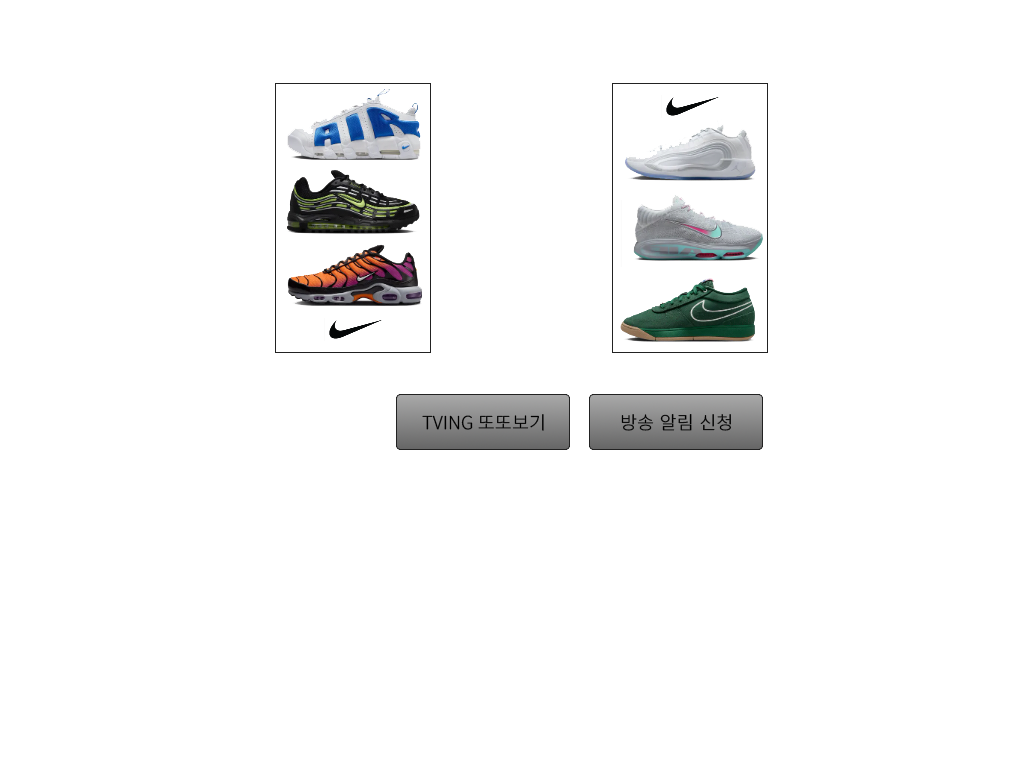
<style>
.page{position:relative;width:1024px;height:768px;background:#ffffff}
.page>*{position:absolute;margin:0}
.t1{font:18px "NotoSansKR-Regular";color:#000000;font-weight:bold}
</style>
<div class="page">
<p class="t1" style="left:422px;top:414px;width:122px;height:17px">TVING 또또보기</p>
<p class="t1" style="left:621px;top:414px;width:110px;height:17px">방송 알림 신청</p>
</div>
